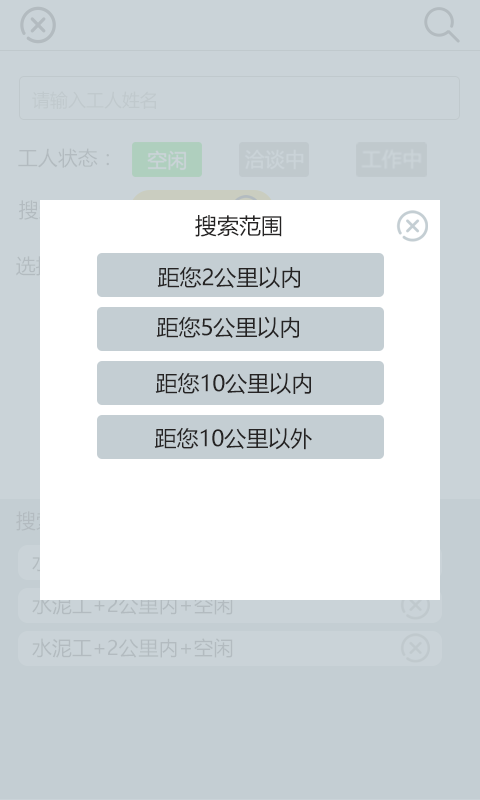
<style>
.page{position:relative;width:480px;height:800px;background:#cad3d8}
.page>*{position:absolute;margin:0}
.t1{font:18px "MicrosoftYaHei";color:#c0c9cd}
.t2{font:20px "MicrosoftYaHei";color:#b3bbc0}
.t3{font:22px "MicrosoftYaHei";color:#252323}
</style>
<div class="page">
<p class="t1" style="left:32px;top:91px;width:124px;height:18px">请输入工人姓名</p>
<p class="t2" style="left:18px;top:148px;width:91px;height:20px">工人状态：</p>
<p class="t3" style="left:195px;top:215px;width:87px;height:22px">搜索范围</p>
<p class="t3" style="left:157px;top:266px;width:143px;height:23px">距您2公里以内</p>
<p class="t3" style="left:156px;top:316px;width:143px;height:23px">距您5公里以内</p>
<p class="t3" style="left:155px;top:372px;width:156px;height:23px">距您10公里以内</p>
<p class="t3" style="left:154px;top:427px;width:158px;height:23px">距您10公里以外</p>
<p class="t2" style="left:32px;top:595px;width:201px;height:20px">水泥工+2公里内+空闲</p>
<p class="t2" style="left:32px;top:638px;width:201px;height:20px">水泥工+2公里内+空闲</p>
</div>
